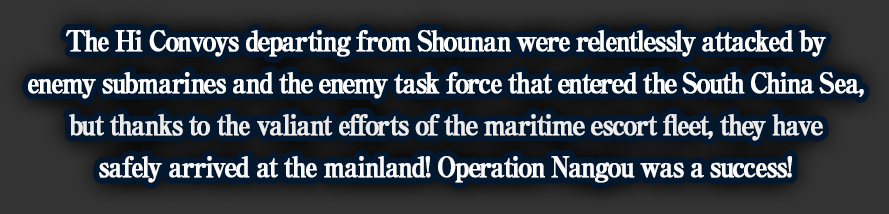
<style>
.page{position:relative;width:889px;height:214px;background:#03172f}
.page>*{position:absolute;margin:0}
.t1{font:28px/42px "RyuminPro-ExBold";letter-spacing:-0.08em;color:#ffffff;font-weight:bold;scale:0.9 1}
</style>
<div class="page">
<p class="t1" style="left:28px;top:30px;width:836px;height:153px;text-align:center">The Hi Convoys departing from Shounan were relentlessly attacked by<br>enemy submarines and the enemy task force that entered the South China Sea,<br>but thanks to the valiant efforts of the maritime escort fleet, they have<br>safely arrived at the mainland! Operation Nangou was a success!</p>
</div>
